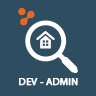
<style>
.page{position:relative;width:96px;height:96px;background:#2d4e61}
.page>*{position:absolute;margin:0}
.t1{font:9px "MyriadPro-Regular";color:#ffffff;font-weight:bold;scale:1.15 1}
</style>
<div class="page">
<p class="t1" style="left:19px;top:78px;width:59px;height:8px">DEV - ADMIN</p>
</div>
